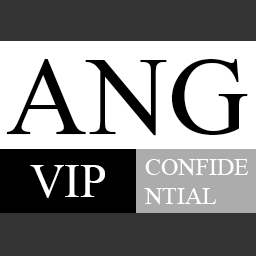
<style>
.page{position:relative;width:256px;height:256px;background:#ffffff}
.page>*{position:absolute;margin:0}
.t1{font:112px "TimesNewRomanPSMT";color:#000000}
.t2{font:24px "TimesNewRomanPSMT";color:#ffffff}
.t3{font:48px "TimesNewRomanPSMT";color:#ffffff}
</style>
<div class="page">
<p class="t1" style="left:6px;top:59px;width:242px;height:77px">ANG</p>
<p class="t2" style="left:144px;top:159px;width:105px;height:46px">CONFIDE<br>NTIAL</p>
<p class="t3" style="left:30px;top:165px;width:75px;height:33px">VIP</p>
</div>
